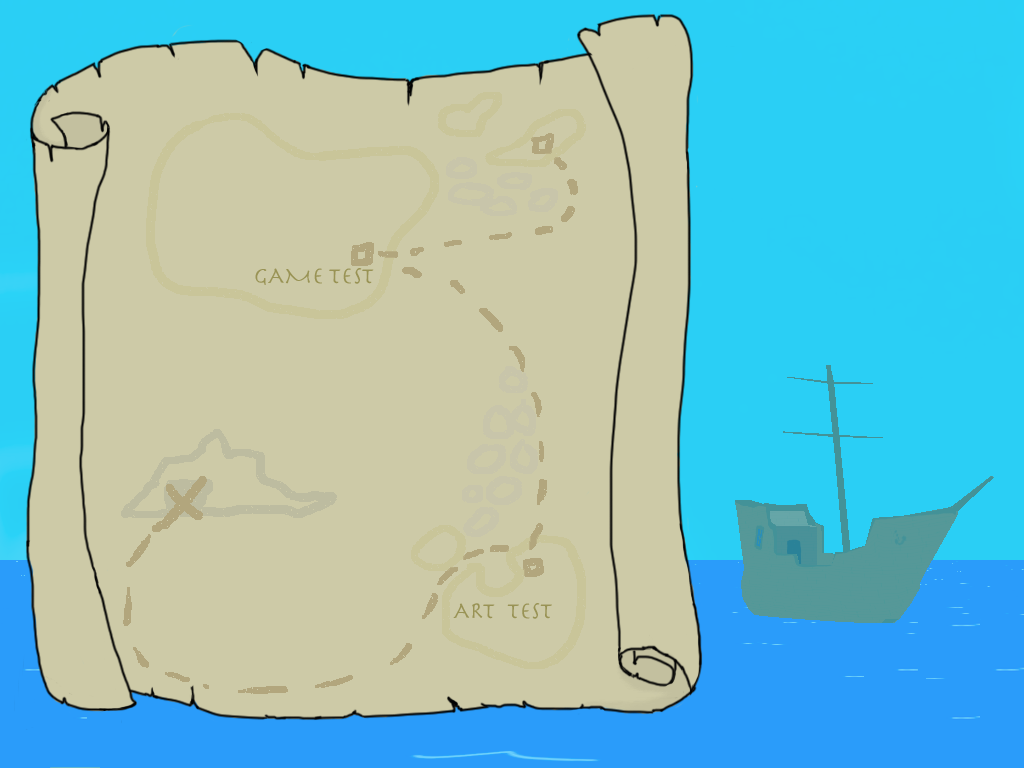
<style>
.page{position:relative;width:1024px;height:768px;background:#cdcaa7}
.page>*{position:absolute;margin:0}
.t1{font:24px "Herculanum";color:#999355}
</style>
<div class="page">
<p class="t1" style="left:255px;top:268px;width:119px;height:17px">GAME TEST</p>
<p class="t1" style="left:453px;top:603px;width:99px;height:16px">ART  TEST</p>
</div>
